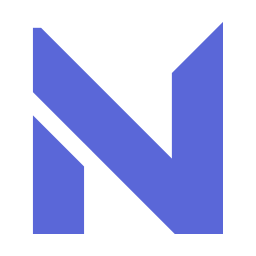
<style>
.page{position:relative;width:256px;height:256px;background:#ffffff}
.page>*{position:absolute;margin:0}
.t1{font:300px "QuantumRegular";color:#5a67d8}
</style>
<div class="page">
<p class="t1" style="left:32px;top:21px;width:191px;height:213px">N</p>
</div>
